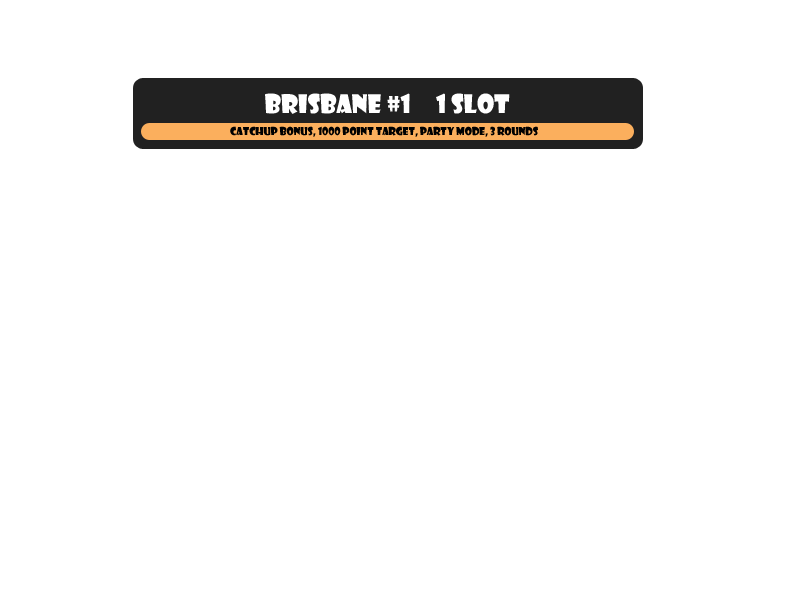
<style>
.page{position:relative;width:800px;height:600px;background:#ffffff}
.page>*{position:absolute;margin:0}
.t1{font:24.9px "ShowcardGothic-Reg";color:#ffffff}
.t2{font:10.4px "ShowcardGothic-Reg";color:#000000}
</style>
<div class="page">
<p class="t1" style="left:265px;top:93px;width:245px;height:21px">brisbane #1     1 slot</p>
<p class="t2" style="left:230px;top:126px;width:308px;height:11px">catchup bonus, 1000 point target, party mode, 3 rounds</p>
</div>
